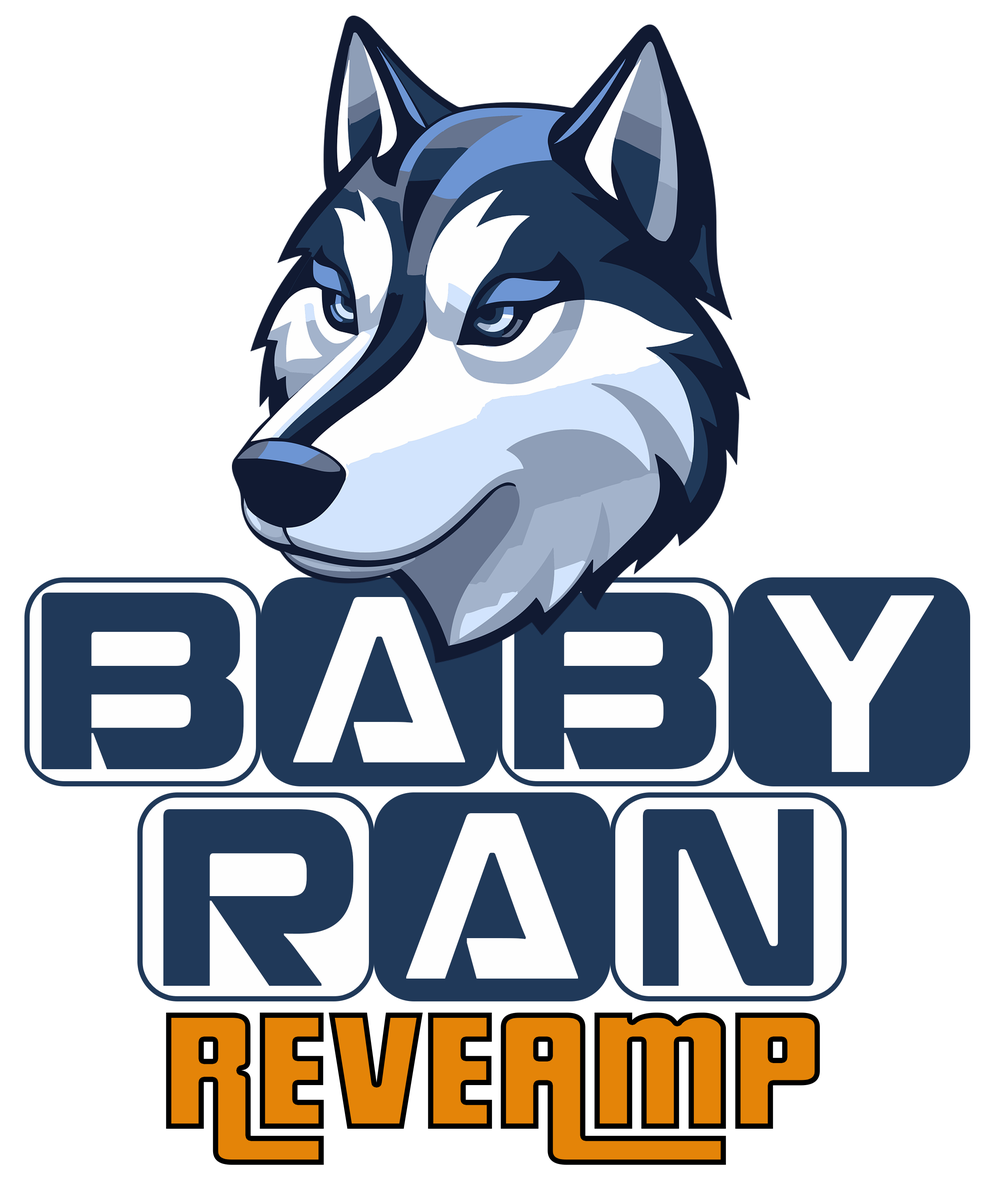
<style>
.page{position:relative;width:995px;height:1198px;background:#ffffff}
.page>*{position:absolute;margin:0}
.t1{font:242.5px "RechargeRg-Bold";color:#203959}
.t2{font:227.2px "RechargeRg-Bold";color:#fefefe;scale:0.72 1}
.t3{font:242.6px "RechargeRg-Bold";color:#fefefe;scale:0.75 1}
.t4{font:242.6px "RechargeRg-Bold";color:#203959;scale:0.93 1}
.t5{font:242.6px "RechargeRg-Bold";color:#203959;scale:0.79 1}
.t6{font:182.1px "PricedownBl-Regular"}
</style>
<div class="page">
<p class="t1" style="left:41px;top:593px;width:203px;height:176px">B</p>
<p class="t1" style="left:514px;top:593px;width:203px;height:176px">B</p>
<p class="t2" style="left:293px;top:597px;width:172px;height:166px">A</p>
<p class="t3" style="left:767px;top:596px;width:167px;height:176px">Y</p>
<p class="t4" style="left:163px;top:810px;width:190px;height:176px">R</p>
<p class="t5" style="left:643px;top:810px;width:171px;height:176px">N</p>
<p class="t2" style="left:406px;top:814px;width:172px;height:165px">A</p>
<p class="t6" style="left:166px;top:1013px;width:654px;height:152px">REVEAMP</p>
</div>
